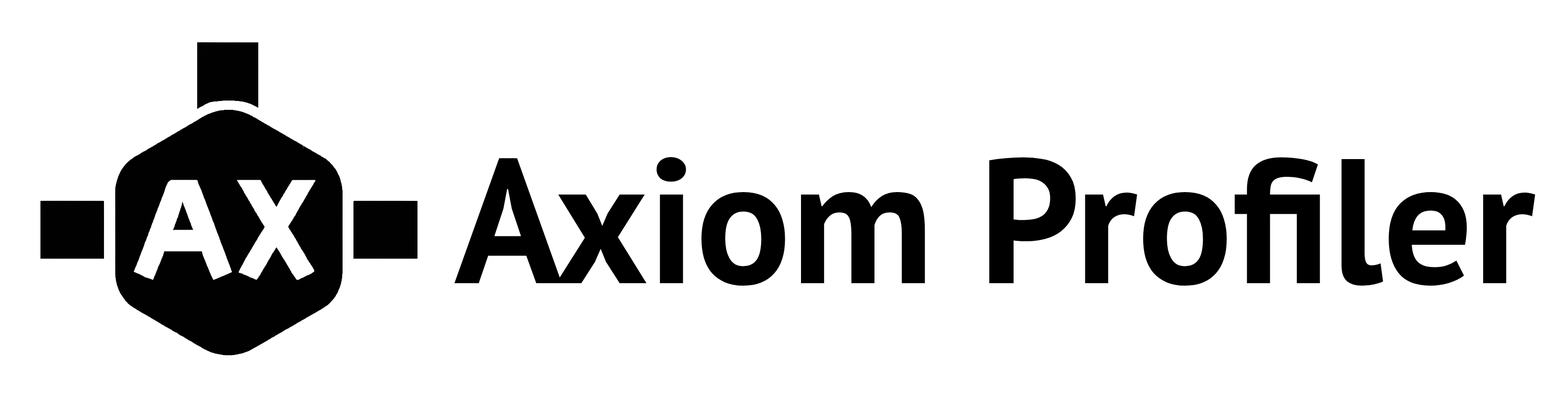
<style>
.page{position:relative;width:1568px;height:394px;background:#ffffff}
.page>*{position:absolute;margin:0}
.t1{font:177.5px "MyriadPro-Bold";color:#000000}
</style>
<div class="page">
<p class="t1" style="left:454px;top:157px;width:1081px;height:129px">Axiom Profiler</p>
</div>
